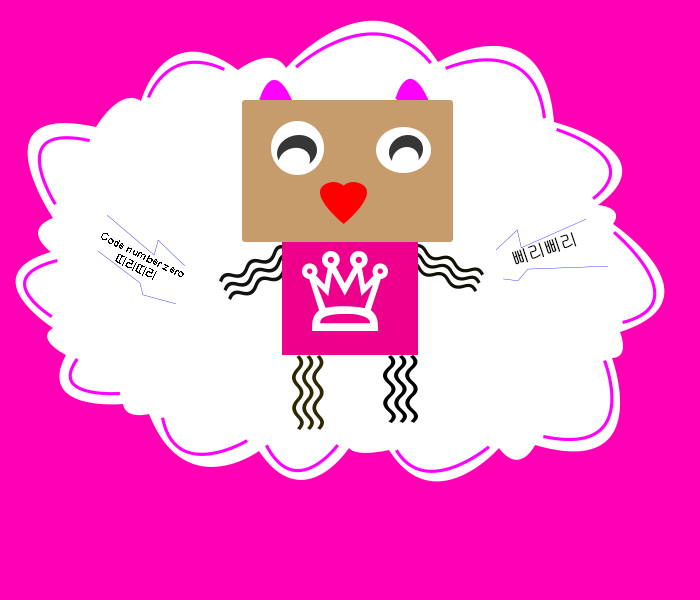
<style>
.page{position:relative;width:700px;height:600px;background:#ff00b4}
.page>*{position:absolute;margin:0}
.t1{font:11.5px "Gulim";letter-spacing:-0.06em;color:#000000}
.t2{font:18px "Gulim";letter-spacing:-0.06em;color:#000000}
</style>
<div class="page">
<p class="t1" style="left:101px;top:233px;width:83px;height:47px;text-align:center;rotate:26deg">Code number zero<br>띠리띠리</p>
<p class="t2" style="left:512px;top:232px;width:65px;height:33px;rotate:-18deg">삐리삐리</p>
</div>
